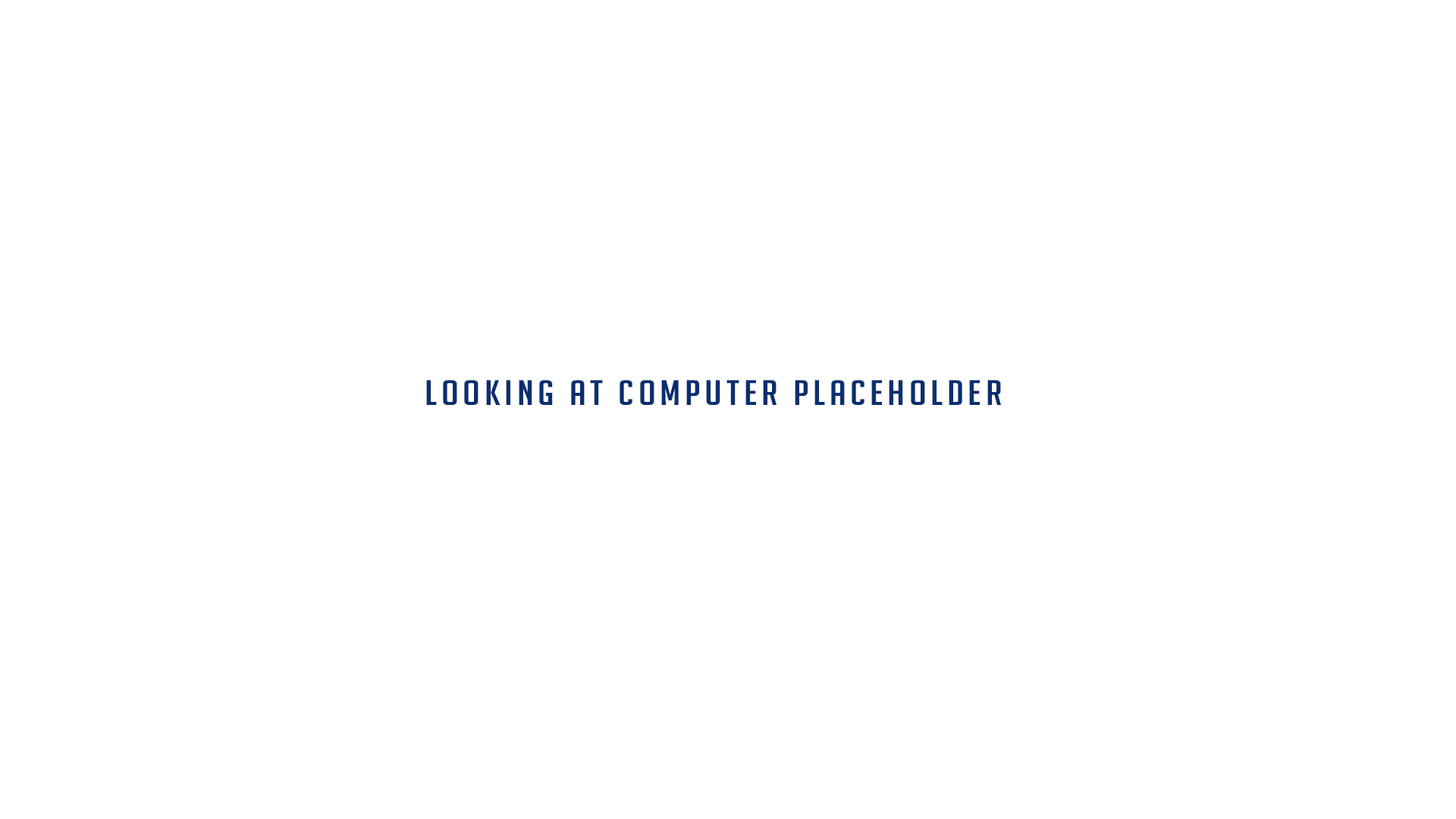
<style>
.page{position:relative;width:1456px;height:819px;background:#ffffff}
.page>*{position:absolute;margin:0}
.t1{font:34.5px "BigNoodleTitling";letter-spacing:0.1em;color:#0a2f70;scale:1.25 1}
</style>
<div class="page">
<p class="t1" style="left:426px;top:380px;width:575px;height:25px">Looking at computer placeholder</p>
</div>
